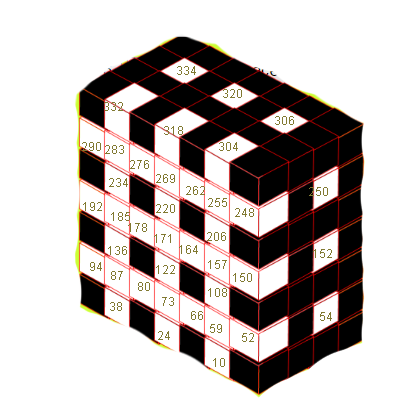
<style>
.page{position:relative;width:401px;height:406px;background:#ffffff}
.page>*{position:absolute;margin:0}
.t1{font:12px "ArialMT";color:#817931}
</style>
<div class="page">
<p class="t1" style="left:177px;top:66px;width:19px;height:9px">334</p>
<p class="t1" style="left:223px;top:89px;width:19px;height:9px">320</p>
<p class="t1" style="left:104px;top:102px;width:19px;height:9px">332</p>
<p class="t1" style="left:164px;top:126px;width:19px;height:9px">318</p>
<p class="t1" style="left:275px;top:116px;width:19px;height:9px">306</p>
<p class="t1" style="left:82px;top:142px;width:19px;height:9px">290</p>
<p class="t1" style="left:105px;top:145px;width:19px;height:9px">283</p>
<p class="t1" style="left:219px;top:142px;width:19px;height:9px">304</p>
<p class="t1" style="left:130px;top:160px;width:19px;height:9px">276</p>
<p class="t1" style="left:156px;top:174px;width:19px;height:9px">269</p>
<p class="t1" style="left:109px;top:178px;width:19px;height:9px">234</p>
<p class="t1" style="left:186px;top:186px;width:19px;height:9px">262</p>
<p class="t1" style="left:208px;top:198px;width:19px;height:9px">255</p>
<p class="t1" style="left:309px;top:187px;width:19px;height:9px">250</p>
<p class="t1" style="left:83px;top:202px;width:19px;height:9px">192</p>
<p class="t1" style="left:156px;top:204px;width:19px;height:9px">220</p>
<p class="t1" style="left:235px;top:208px;width:19px;height:9px">248</p>
<p class="t1" style="left:111px;top:212px;width:19px;height:9px">185</p>
<p class="t1" style="left:128px;top:223px;width:19px;height:9px">178</p>
<p class="t1" style="left:207px;top:232px;width:19px;height:9px">206</p>
<p class="t1" style="left:108px;top:246px;width:19px;height:9px">136</p>
<p class="t1" style="left:154px;top:234px;width:17px;height:9px">171</p>
<p class="t1" style="left:179px;top:245px;width:19px;height:9px">164</p>
<p class="t1" style="left:313px;top:249px;width:19px;height:9px">152</p>
<p class="t1" style="left:90px;top:262px;width:12px;height:9px">94</p>
<p class="t1" style="left:156px;top:265px;width:19px;height:9px">122</p>
<p class="t1" style="left:208px;top:260px;width:19px;height:9px">157</p>
<p class="t1" style="left:111px;top:271px;width:12px;height:9px">87</p>
<p class="t1" style="left:233px;top:273px;width:19px;height:9px">150</p>
<p class="t1" style="left:138px;top:282px;width:12px;height:9px">80</p>
<p class="t1" style="left:208px;top:288px;width:19px;height:9px">108</p>
<p class="t1" style="left:110px;top:302px;width:12px;height:9px">38</p>
<p class="t1" style="left:162px;top:297px;width:12px;height:9px">73</p>
<p class="t1" style="left:191px;top:311px;width:12px;height:9px">66</p>
<p class="t1" style="left:320px;top:312px;width:12px;height:9px">54</p>
<p class="t1" style="left:210px;top:324px;width:12px;height:9px">59</p>
<p class="t1" style="left:158px;top:331px;width:12px;height:9px">24</p>
<p class="t1" style="left:242px;top:333px;width:12px;height:9px">52</p>
<p class="t1" style="left:213px;top:358px;width:12px;height:9px">10</p>
</div>
